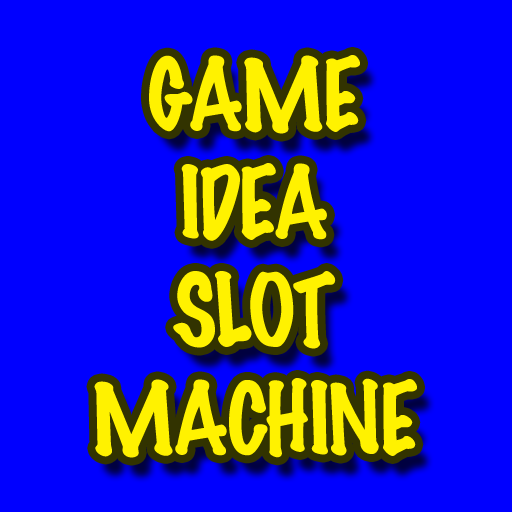
<style>
.page{position:relative;width:512px;height:512px;background:#0000ff}
.page>*{position:absolute;margin:0}
.t1{font:90px "MarkerFelt-Thin";letter-spacing:-0.04em;color:#fff200}
</style>
<div class="page">
<p class="t1" style="left:94px;top:55px;width:323px;height:403px;text-align:center">GAME<br>IDEA<br>SLOT<br>MACHINE</p>
</div>
